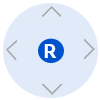
<style>
.page{position:relative;width:100px;height:100px;background:#e1eaf9}
.page>*{position:absolute;margin:0}
.t1{font:20px "JosefinSans-Bold";color:#ffffff}
</style>
<div class="page">
<p class="t1" style="left:44px;top:44px;width:13px;height:14px">R</p>
</div>
